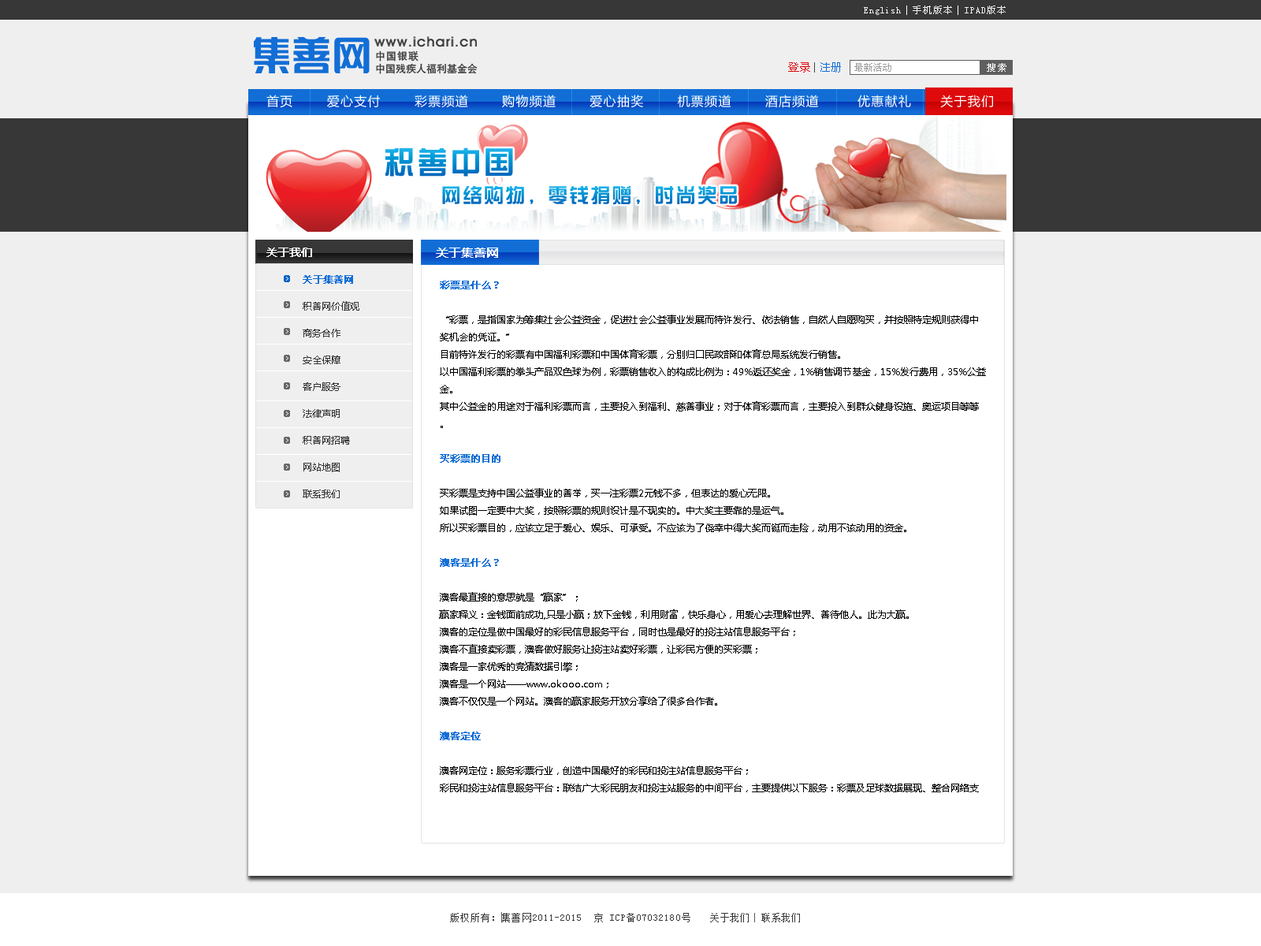
<style>
.page{position:relative;width:1261px;height:946px;background:#ffffff}
.page>*{position:absolute;margin:0}
.t1{font:9.5px "SimSun";letter-spacing:0.09em;color:#f0efef}
.t2{font:9.5px "SimSun";letter-spacing:0.07em;color:#f0efef}
.t3{font:10.2px "HeitiCSEG-Medium-GB";letter-spacing:0.08em;color:#373738}
.t4{font:10.2px "HeitiCSEG-Medium-GB";color:#373738}
.t5{font:11px "FZLTXHK--GBK1-0";letter-spacing:0.01em;color:#dd0a0d}
.t6{font:10.2px "FZLTXHK--GBK1-0";letter-spacing:0.01em;color:#434344}
.t7{font:11px "FZLTXHK--GBK1-0";letter-spacing:0.01em;color:#126ed6}
.t8{font:9.5px "SimSun";color:#9fa0a0}
.t9{font:9.5px "SimSun";letter-spacing:0.16em;color:#ffffff}
.t10{font:12.6px "MicrosoftYaHei";letter-spacing:0.08em;color:#ffffff}
.t11{font:30.8px "HYk1gj";letter-spacing:0.08em}
.t12{font:19.8px "HYk1gj";letter-spacing:0.08em}
.t13{font:11px "MicrosoftYaHei";color:#ffffff;font-weight:bold}
.t14{font:11.8px "MicrosoftYaHei";color:#ffffff;font-weight:bold}
.t15{font:9.5px/26.8px "MicrosoftYaHei";color:#373738}
.t16{font:9.5px/26.8px "MicrosoftYaHei";color:#126ed6;font-weight:bold}
.t17{font:9.5px/17.3px "MicrosoftYaHei";color:#000000}
.t18{font:9.5px/17.3px "MicrosoftYaHei";color:#126ed6;font-weight:bold}
.t19{font:9.5px "SimSun";letter-spacing:0.09em;color:#373738}
.t20{font:9.5px "SimSun";letter-spacing:0.07em;color:#373738}
</style>
<div class="page">
<p class="t1" style="left:864px;top:6px;width:142px;height:9px"><span class="t2">English  </span>手机版本  IPAD版本</p>
<p class="t3" style="left:376px;top:50px;width:42px;height:11px">中国银联</p>
<p class="t4" style="left:376px;top:63px;width:102px;height:11px">中国残疾人福利基金会</p>
<p class="t5" style="left:788px;top:62px;width:53px;height:11px">登录 <span class="t6">| </span><span class="t7">注册</span></p>
<p class="t8" style="left:854px;top:63px;width:37px;height:9px">最新活动</p>
<p class="t9" style="left:987px;top:63px;width:19px;height:9px">搜索</p>
<p class="t10" style="left:266px;top:95px;width:727px;height:13px">首页       爱心支付       彩票频道       购物频道       爱心抽奖       机票频道       酒店频道        优惠献礼      关于我们</p>
<p class="t11" style="left:385px;top:147px;width:128px;height:30px">积善中国</p>
<p class="t12" style="left:442px;top:186px;width:295px;height:19px">网络购物，零钱捐赠，时尚奖品</p>
<p class="t13" style="left:266px;top:247px;width:46px;height:10px">关于我们</p>
<p class="t14" style="left:436px;top:247px;width:62px;height:11px">关于集善网</p>
<p class="t15" style="left:303px;top:275px;width:56px;height:223px"><span class="t16">关于集善网<br></span>积善网价值观<br>商务合作<br>安全保障<br>客户服务<br>法律声明<br>积善网招聘<br>网站地图<br>联系我们</p>
<p class="t17" style="left:439px;top:281px;width:547px;height:511px"><span class="t18">彩票是什么？<br></span><br>“彩票，是指国家为筹集社会公益资金，促进社会公益事业发展而特许发行、依法销售，自然人自愿购买，并按照特定规则获得中奖机会的凭证。”<br>目前特许发行的彩票有中国福利彩票和中国体育彩票，分别归口民政部和体育总局系统发行销售。<br>以中国福利彩票的拳头产品双色球为例，彩票销售收入的构成比例为：49%返还奖金，1%销售调节基金，15%发行费用，35%公益金。<br>其中公益金的用途对于福利彩票而言，主要投入到福利、慈善事业；对于体育彩票而言，主要投入到群众健身设施、奥运项目等等。<br><span class="t18"><br>买彩票的目的<br></span><br>买彩票是支持中国公益事业的善举，买一注彩票2元钱不多，但表达的爱心无限。<br>如果试图一定要中大奖，按照彩票的规则设计是不现实的。中大奖主要靠的是运气。<br>所以买彩票目的，应该立足于爱心、娱乐、可承受。不应该为了侥幸中得大奖而铤而走险，动用不该动用的资金。<br><span class="t18"><br>澳客是什么？<br></span><br>澳客最直接的意思就是“赢家”；<br>赢家释义：金钱面前成功,只是小赢；放下金钱，利用财富，快乐身心，用爱心去理解世界、善待他人。此为大赢。<br>澳客的定位是做中国最好的彩民信息服务平台，同时也是最好的投注站信息服务平台；<br>澳客不直接卖彩票，澳客做好服务让投注站卖好彩票，让彩民方便的买彩票；<br>澳客是一家优秀的竞猜数据引擎；<br>澳客是一个网站——www.okooo.com；<br>澳客不仅仅是一个网站。澳客的赢家服务开放分享给了很多合作者。<br><br><span class="t18">澳客定位<br></span><br>澳客网定位：服务彩票行业，创造中国最好的彩民和投注站信息服务平台；<br>彩民和投注站信息服务平台：联结广大彩民朋友和投注站服务的中间平台，主要提供以下服务：彩票及足球数据展现、整合网络支付接入、即时票务信息监督、做单交易撮合；<br>投注站信息服务平台的存在，让投注站变得更强大、服务更好、彩票卖得更多，同时也让彩民朋友受益，可以更方便、更放心的购买彩票。 作为投注站信息服务平台的澳客网本质上更是赢家平台,为广大赢家及潜在赢家提供数据、工具和服务。<br>澳客口号<br><br>澳客网，赢家天下！</p>
<p class="t19" style="left:450px;top:913px;width:240px;height:9px">版权所有：集善网2011-2015  京 ICP备07032180号</p>
<p class="t20" style="left:710px;top:913px;width:90px;height:9px">关于我们  联系我们</p>
</div>
